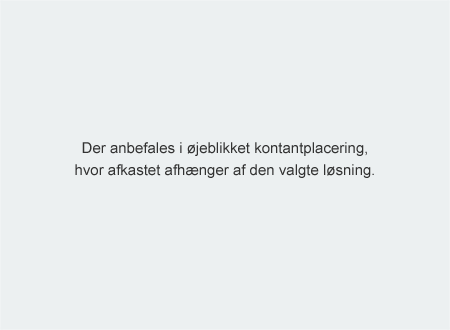
<style>
.page{position:relative;width:450px;height:330px;background:#ecf0f1}
.page>*{position:absolute;margin:0}
.t1{font:15px/22px "ArialMT";color:#333333}
</style>
<div class="page">
<p class="t1" style="left:75px;top:142px;width:299px;height:36px;text-align:center">Der anbefales i øjeblikket kontantplacering,<br>hvor afkastet afhænger af den valgte løsning.</p>
</div>
